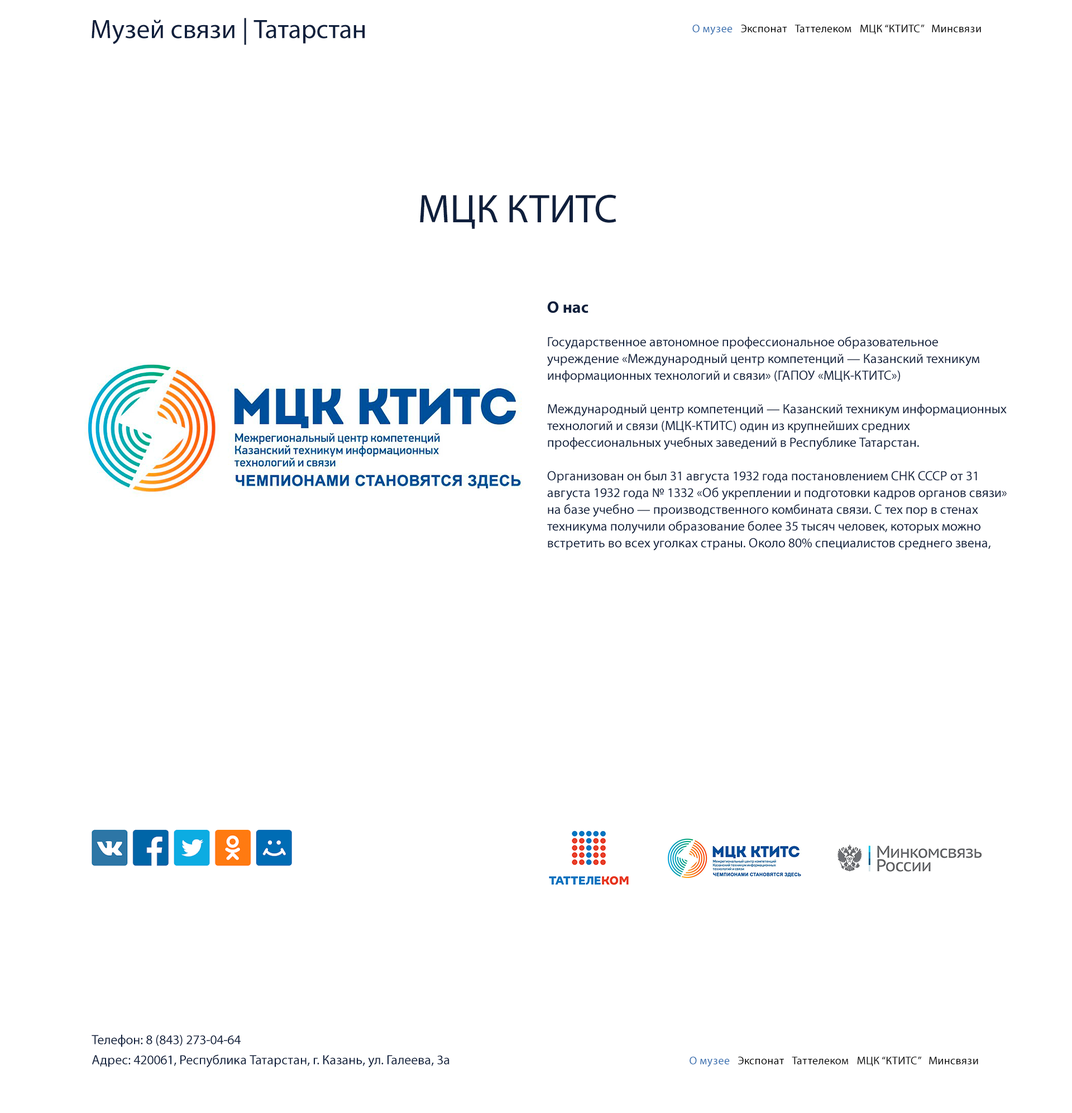
<style>
.page{position:relative;width:1072px;height:1113px;background:#ffffff}
.page>*{position:absolute;margin:0}
.t1{font:26.8px "MyriadPro-Regular";color:#0f1f3c}
.t2{font:11.2px "MyriadPro-Regular";letter-spacing:0.02em;color:#000000}
.t3{font:11.2px "MyriadPro-Regular";letter-spacing:0.02em;color:#356eaf}
.t4{font:40.2px "MyriadPro-Regular";color:#0f1f3c}
.t5{font:13.4px/16.7px "MyriadPro-Regular";color:#0f1f3c}
.t6{font:16.7px/16.7px "MyriadPro-Bold";color:#0f1f3c}
.t7{font:13.4px/20.1px "MyriadPro-Regular";color:#0f1f3c}
.t8{font:11.2px "MyriadPro-Regular";letter-spacing:0.02em;color:#040404}
</style>
<div class="page">
<p class="t1" style="left:92px;top:18px;width:273px;height:27px">Музей связи | Татарстан</p>
<p class="t2" style="left:692px;top:25px;width:289px;height:10px"><span class="t3">О музее </span>Экспонат Таттелеком МЦК “КТИТС” Минсвязи</p>
<p class="t4" style="left:420px;top:194px;width:196px;height:35px">МЦК КТИТС</p>
<p class="t5" style="left:547px;top:301px;width:459px;height:249px"><span class="t6">О нас<br></span><br>Государственное автономное профессиональное образовательное учреждение «Международный центр компетенций — Казанский техникум информационных технологий и связи» (ГАПОУ «МЦК-КТИТС»)<br><br>Международный центр компетенций — Казанский техникум информационных технологий и связи (МЦК-КТИТС) один из крупнейших средних профессиональных учебных заведений в Республике Татарстан.<br><br>Организован он был 31 августа 1932 года постановлением СНК СССР от 31 августа 1932 года № 1332 «Об укреплении и подготовки кадров органов связи» на базе учебно — производственного комбината связи. С тех пор в стенах техникума получили образование более 35 тысяч человек, которых можно встретить во всех уголках страны. Около 80% специалистов среднего звена, работающих на Казанских предприятиях связи — выпускники техникума.<br><br>Цифровые телекоммуникационные услуги — 51 %<br>Телефонная связь — 29 %<br>Услуги пропуска трафика — 4 %<br>Аренда инфраструктуры — 8 %<br>Прочие услуги — 8 %<br>Количество базовых станций сотовой связи к концу 2017 года составило более 2500 шт. на территории Республики Татарстан. Доля ПАО «Таттелеком» фиксированной телефонной связи составляет 78 %.<br><br><br>Контакты:<br><br>Адрес: 420061, Казань, ул. Н. Ершова, 57 Показать на карте<br>Факс: 8 (843) 264-20-96<br>Эл. почта: kancel@tattelecom.ru</p>
<p class="t7" style="left:92px;top:1034px;width:357px;height:33px">Телефон: 8 (843) 273-04-64<br>Адрес: 420061, Республика Татарстан, г. Казань, ул. Галеева, 3а</p>
<p class="t8" style="left:689px;top:1056px;width:289px;height:10px"><span class="t3">О музее </span>Экспонат Таттелеком МЦК “КТИТС” Минсвязи</p>
</div>
